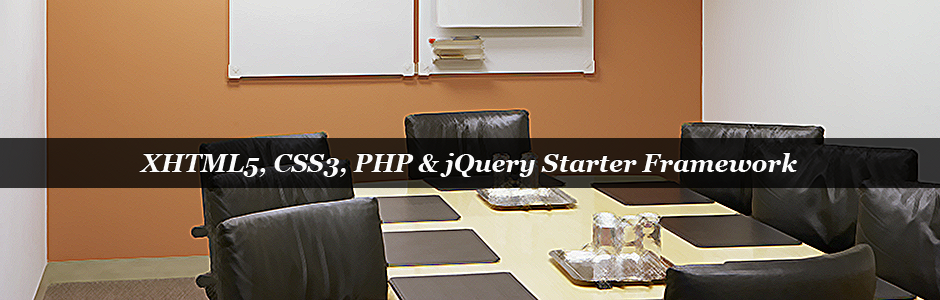
<style>
.page{position:relative;width:940px;height:300px}
.page>*{position:absolute;margin:0}
.t1{font:25px "Georgia-BoldItalic";color:#fbfbfb}
</style>
<div class="page">
<p class="t1" style="left:139px;top:153px;width:658px;height:24px">XHTML5, CSS3, PHP &amp; jQuery Starter Framework</p>
</div>
